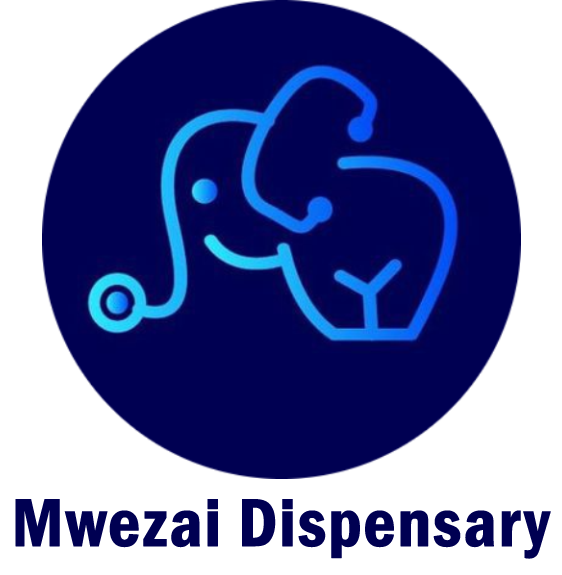
<style>
.page{position:relative;width:562px;height:575px;background:#ffffff}
.page>*{position:absolute;margin:0}
.t1{font:70px "FranklinGothic-DemiCond";color:#000052;font-weight:bold}
</style>
<div class="page">
<p class="t1" style="left:15px;top:499px;width:536px;height:60px">Mwezai Dispensary</p>
</div>
